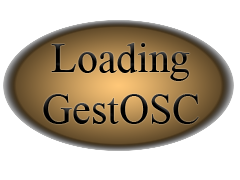
<style>
.page{position:relative;width:240px;height:180px;background:#ffffff}
.page>*{position:absolute;margin:0}
.t1{font:41.7px "TimesNewRomanPSMT";color:#000000}
</style>
<div class="page">
<p class="t1" style="left:51px;top:43px;width:139px;height:38px">Loading</p>
<p class="t1" style="left:43px;top:94px;width:156px;height:30px">GestOSC</p>
</div>
